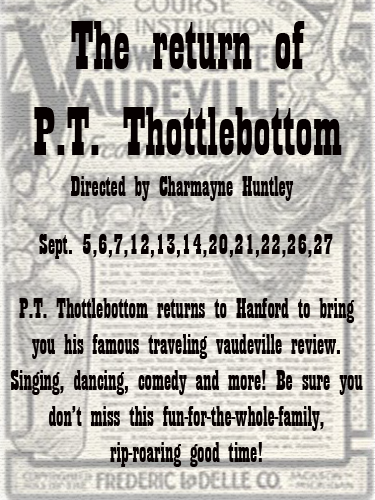
<style>
.page{position:relative;width:375px;height:500px}
.page>*{position:absolute;margin:0}
.t1{font:72px "Playbill";color:#060000}
.t2{font:30px "Playbill";color:#060000}
</style>
<div class="page">
<p class="t1" style="left:34px;top:21px;width:308px;height:134px;text-align:center">The return of<br>P.T. Thottlebottom</p>
<p class="t2" style="left:71px;top:176px;width:223px;height:25px">Directed by Charmayne Huntley</p>
<p class="t2" style="left:39px;top:234px;width:294px;height:25px">Sept. 5,6,7,12,13,14,20,21,22,26,27</p>
<p class="t2" style="left:10px;top:298px;width:353px;height:169px;text-align:center">P.T. Thottlebottom returns to Hanford to bring you his famous traveling vaudeville review. <br>Singing, dancing, comedy and more! Be sure you don’t miss this fun-for-the-whole-family, <br>rip-roaring good time!</p>
</div>
